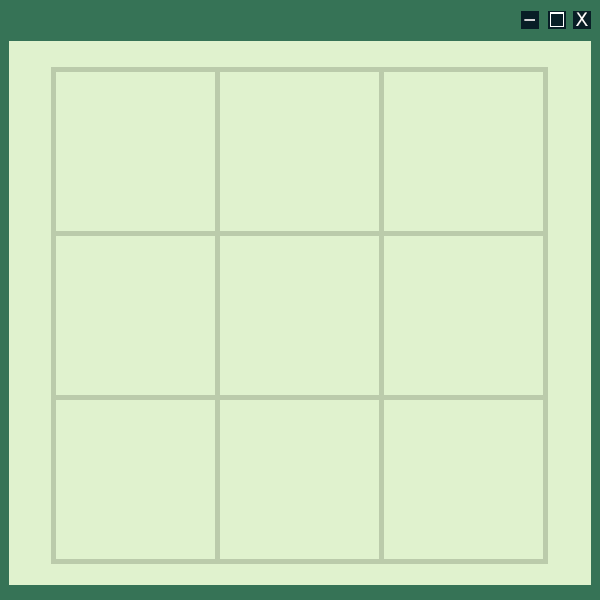
<style>
.page{position:relative;width:600px;height:600px;background:#e0f2ce}
.page>*{position:absolute;margin:0}
.t1{font:18.8px "ArialMT";color:#ffffff;scale:0.95 1}
.t2{font:18.8px "ArialMT";scale:0.95 1}
</style>
<div class="page">
<p class="t1" style="left:576px;top:12px;width:12px;height:14px">X</p>
<p class="t2" style="left:524px;top:19px;width:11px;height:2px">__</p>
</div>
